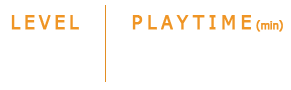
<style>
.page{position:relative;width:291px;height:90px;background:#ffffff}
.page>*{position:absolute;margin:0}
.t1{font:18.7px "Tahoma";letter-spacing:0.2em;color:#ef9525;font-weight:bold}
.t2{font:18.7px "Tahoma";letter-spacing:0.25em;color:#ef9525;font-weight:bold}
.t3{font:10.7px "Tahoma";color:#ef9525;font-weight:bold}
</style>
<div class="page">
<p class="t1" style="left:11px;top:15px;width:68px;height:15px">LEVEL</p>
<p class="t2" style="left:132px;top:15px;width:119px;height:15px">PLAYTIME</p>
<p class="t3" style="left:256px;top:20px;width:27px;height:12px">(min)</p>
</div>
